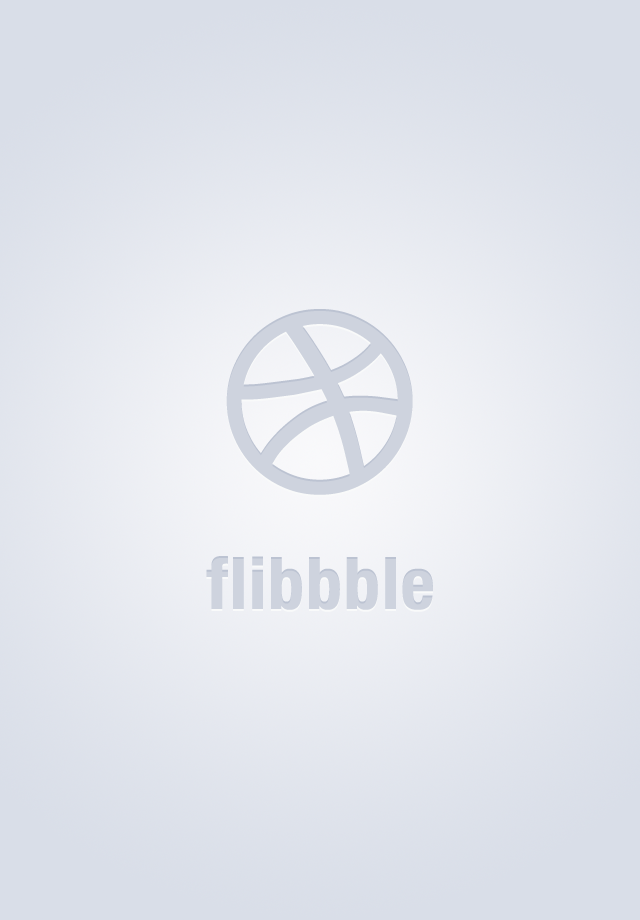
<style>
.page{position:relative;width:640px;height:920px}
.page>*{position:absolute;margin:0}
.t1{font:72px "HelveticaNeue-CondensedBold";color:#ced3de;font-weight:bold}
</style>
<div class="page">
<p class="t1" style="left:206px;top:556px;width:227px;height:54px">flibbble</p>
</div>
